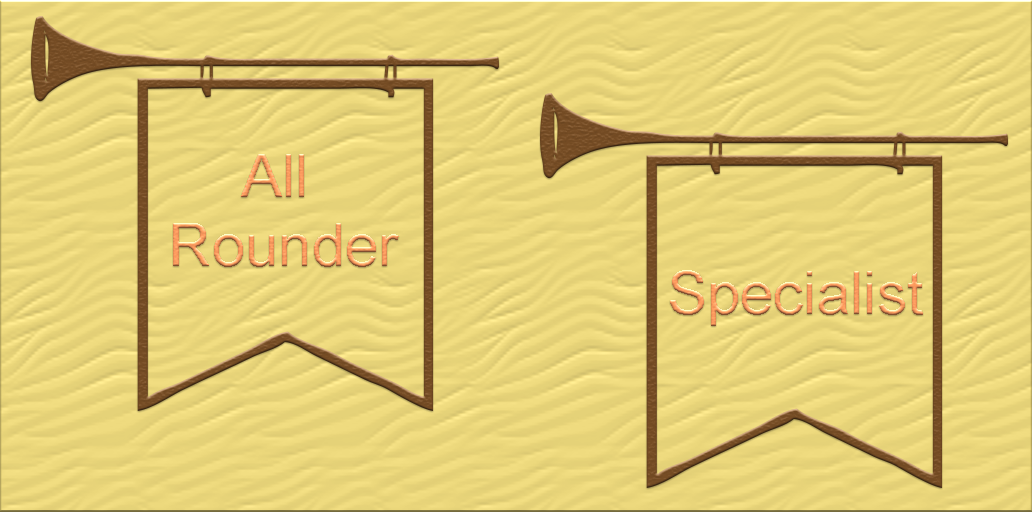
<style>
.page{position:relative;width:1032px;height:512px}
.page>*{position:absolute;margin:0}
.t1{font:60px/69px "ArialMT"}
.t2{font:60px "ArialMT"}
</style>
<div class="page">
<p class="t1" style="left:173px;top:154px;width:226px;height:113px;text-align:center">All<br> Rounder</p>
<p class="t2" style="left:670px;top:270px;width:253px;height:56px">Specialist</p>
</div>
